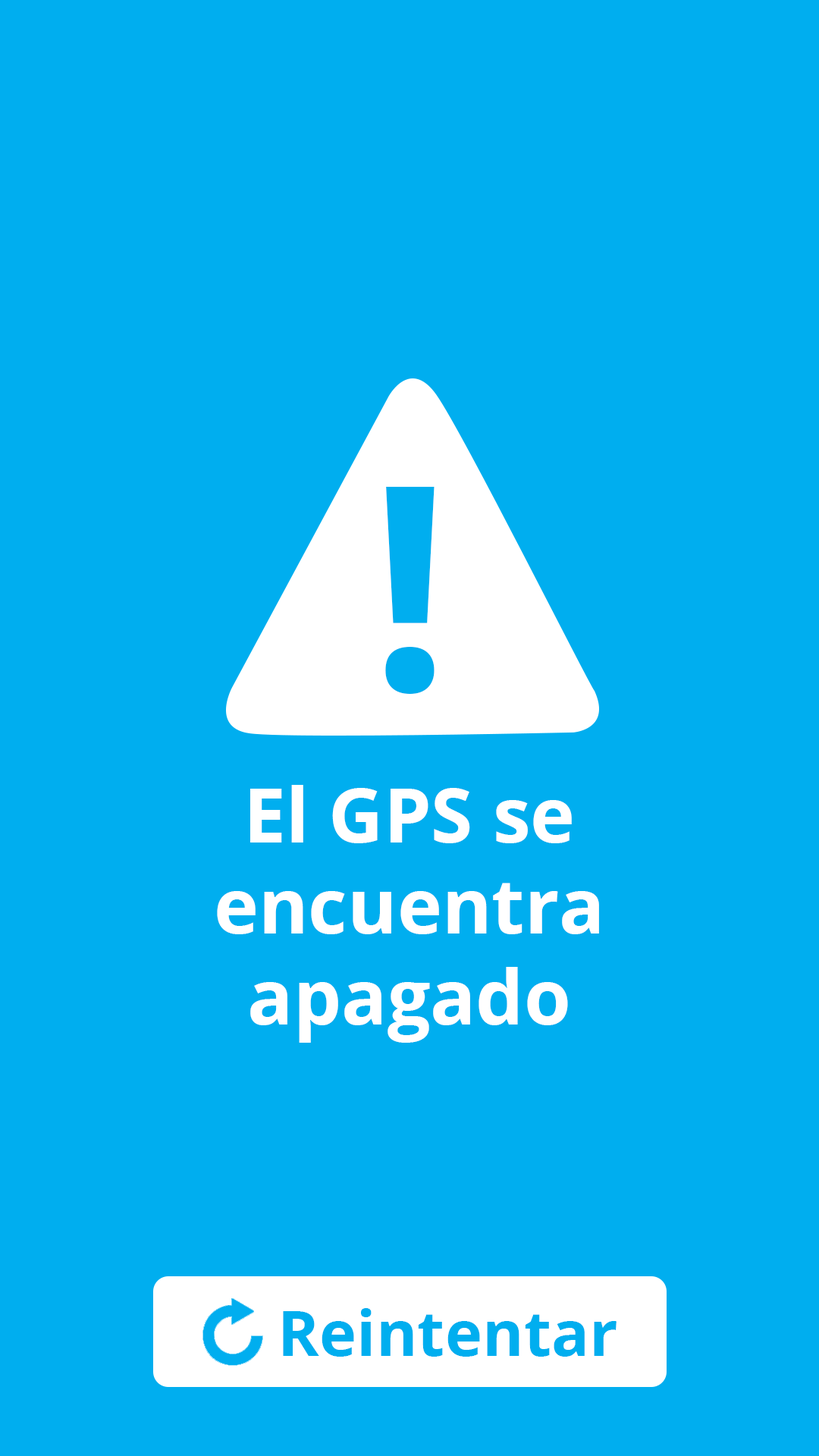
<style>
.page{position:relative;width:819px;height:1456px;background:#00aeef}
.page>*{position:absolute;margin:0}
.t1{font:284.4px "OpenSans-Bold";color:#00aeef}
.t2{font:75.8px "OpenSans-Bold";color:#ffffff}
.t3{font:63.2px "OpenSans-Bold";color:#00aeef}
</style>
<div class="page">
<p class="t1" style="left:385px;top:486px;width:50px;height:208px">!</p>
<p class="t2" style="left:217px;top:785px;width:382px;height:258px;text-align:center">El GPS se encuentra apagado</p>
<p class="t3" style="left:283px;top:1308px;width:334px;height:49px">Reintentar</p>
</div>
